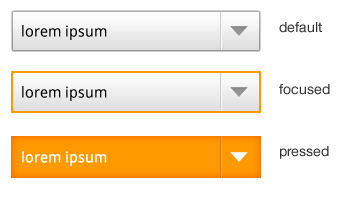
<style>
.page{position:relative;width:350px;height:200px;background:#ffffff}
.page>*{position:absolute;margin:0}
.t1{font:15px "DroidSans";color:#000000}
.t2{font:14px/62px "HelveticaNeue-Roman";color:#333333}
.t3{font:15px "DroidSans";color:#ffffff}
</style>
<div class="page">
<p class="t1" style="left:22px;top:25px;width:85px;height:15px">lorem ipsum</p>
<p class="t2" style="left:279px;top:22px;width:51px;height:137px">default<br>focused<br>pressed</p>
<p class="t1" style="left:22px;top:86px;width:85px;height:15px">lorem ipsum</p>
<p class="t3" style="left:22px;top:151px;width:85px;height:16px">lorem ipsum</p>
</div>
